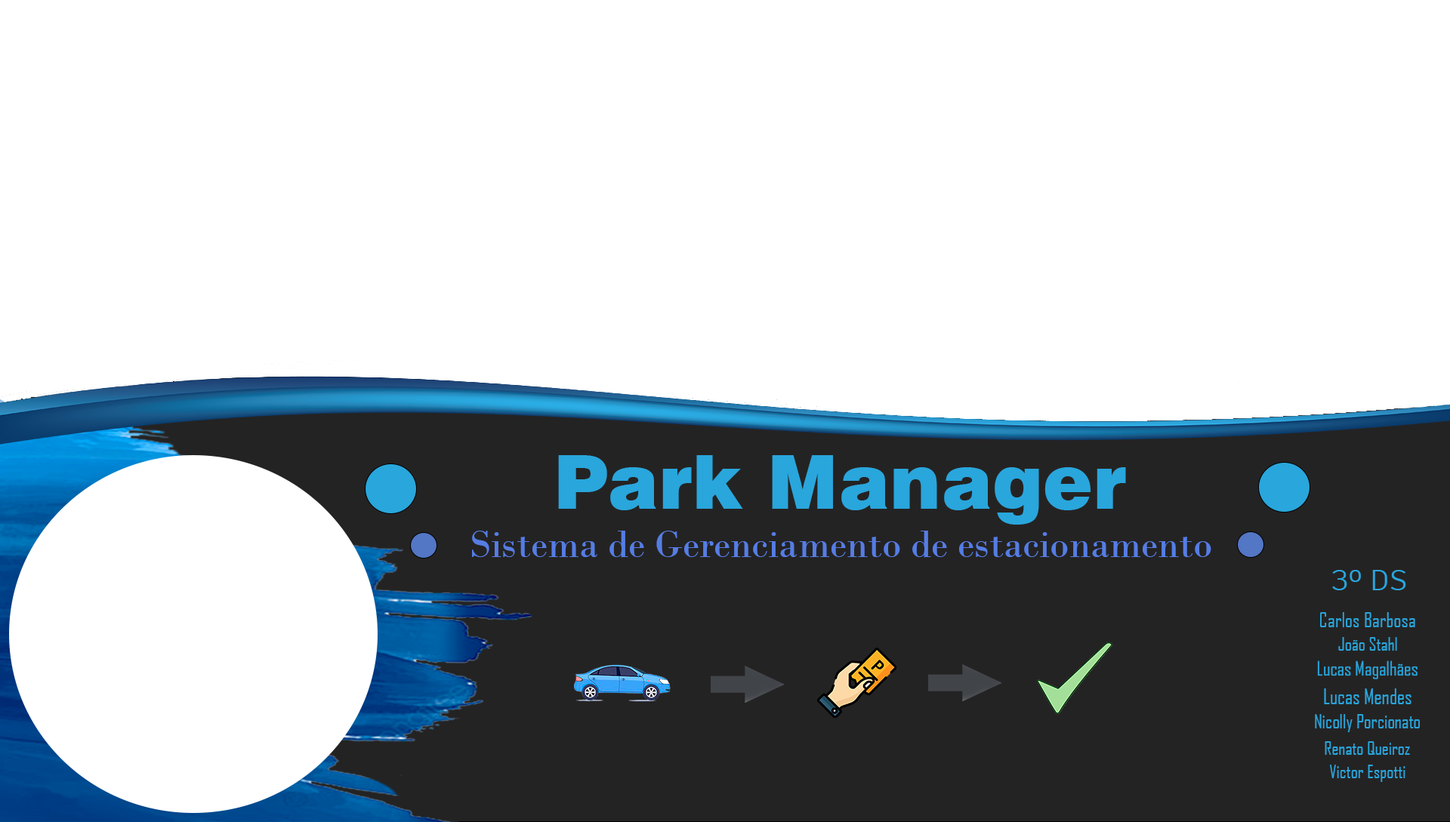
<style>
.page{position:relative;width:1450px;height:822px;background:#ffffff}
.page>*{position:absolute;margin:0}
.t1{font:74.8px "Swiss721BT-Black";color:#29a6dc}
.t2{font:39px "BodoniMT";color:#557de4}
.t3{font:29.6px "ArtifaktElement-Regular";color:#29a6dc}
.t4{font:19.9px "AgencyFB-Reg";color:#29a6dc}
.t5{font:18px "AgencyFB-Reg";color:#29a6dc}
.t6{font:19.1px "AgencyFB-Reg";color:#29a6dc}
.t7{font:20.4px "AgencyFB-Reg";color:#29a6dc}
.t8{font:18.7px "AgencyFB-Reg";color:#29a6dc}
</style>
<div class="page">
<p class="t1" style="left:558px;top:455px;width:568px;height:70px">Park Manager</p>
<p class="t2" style="left:472px;top:531px;width:739px;height:27px">Sistema de Gerenciamento de estacionamento</p>
<p class="t3" style="left:1332px;top:570px;width:74px;height:21px">3º DS</p>
<p class="t4" style="left:1320px;top:612px;width:95px;height:16px">Carlos Barbosa</p>
<p class="t5" style="left:1338px;top:637px;width:59px;height:14px">João Stahl</p>
<p class="t6" style="left:1317px;top:661px;width:100px;height:19px">Lucas Magalhães</p>
<p class="t7" style="left:1324px;top:689px;width:87px;height:16px">Lucas Mendes</p>
<p class="t8" style="left:1315px;top:714px;width:105px;height:19px">Nicolly Porcionato</p>
<p class="t5" style="left:1325px;top:742px;width:85px;height:13px">Renato Queiroz</p>
<p class="t5" style="left:1330px;top:765px;width:75px;height:17px">Victor Espotti</p>
</div>
